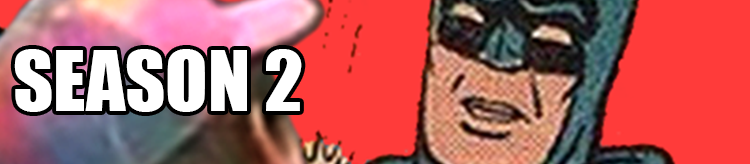
<style>
.page{position:relative;width:750px;height:164px;background:#ff3b3a}
.page>*{position:absolute;margin:0}
.t1{font:77.5px "Impact";color:#ffffff}
</style>
<div class="page">
<p class="t1" style="left:14px;top:49px;width:288px;height:63px">SEASON 2</p>
</div>
